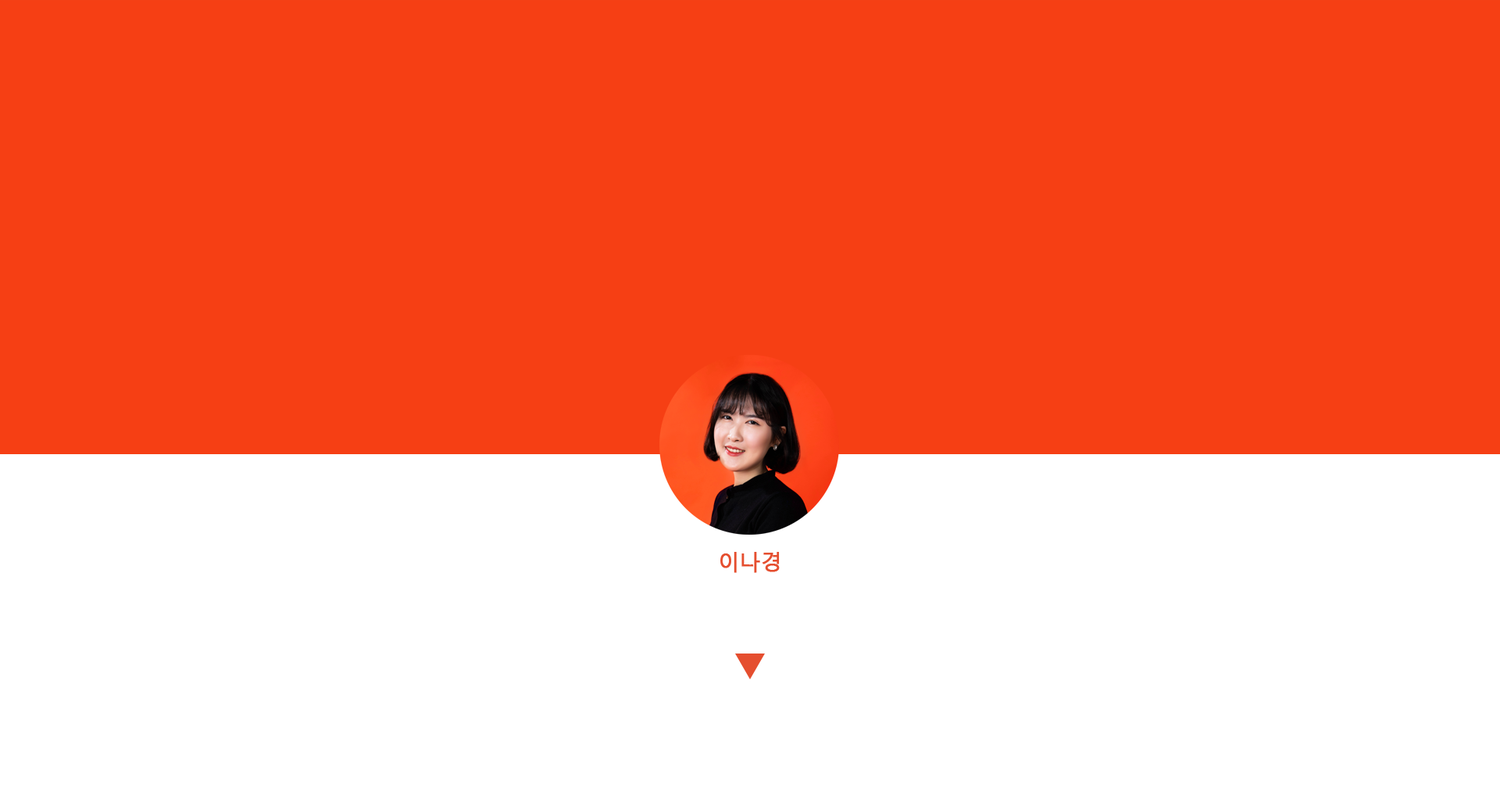
<style>
.page{position:relative;width:1500px;height:795px;background:#f63f14}
.page>*{position:absolute;margin:0}
.t1{font:20.8px "MalgunGothic";color:#e54e2f;font-weight:bold}
</style>
<div class="page">
<p class="t1" style="left:721px;top:552px;width:59px;height:21px">이나경</p>
</div>
